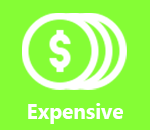
<style>
.page{position:relative;width:150px;height:130px;background:#85fd35}
.page>*{position:absolute;margin:0}
.t1{font:20.8px "SegoeUI-Bold";color:#ffffff}
</style>
<div class="page">
<p class="t1" style="left:28px;top:103px;width:95px;height:21px">Expensive</p>
</div>
